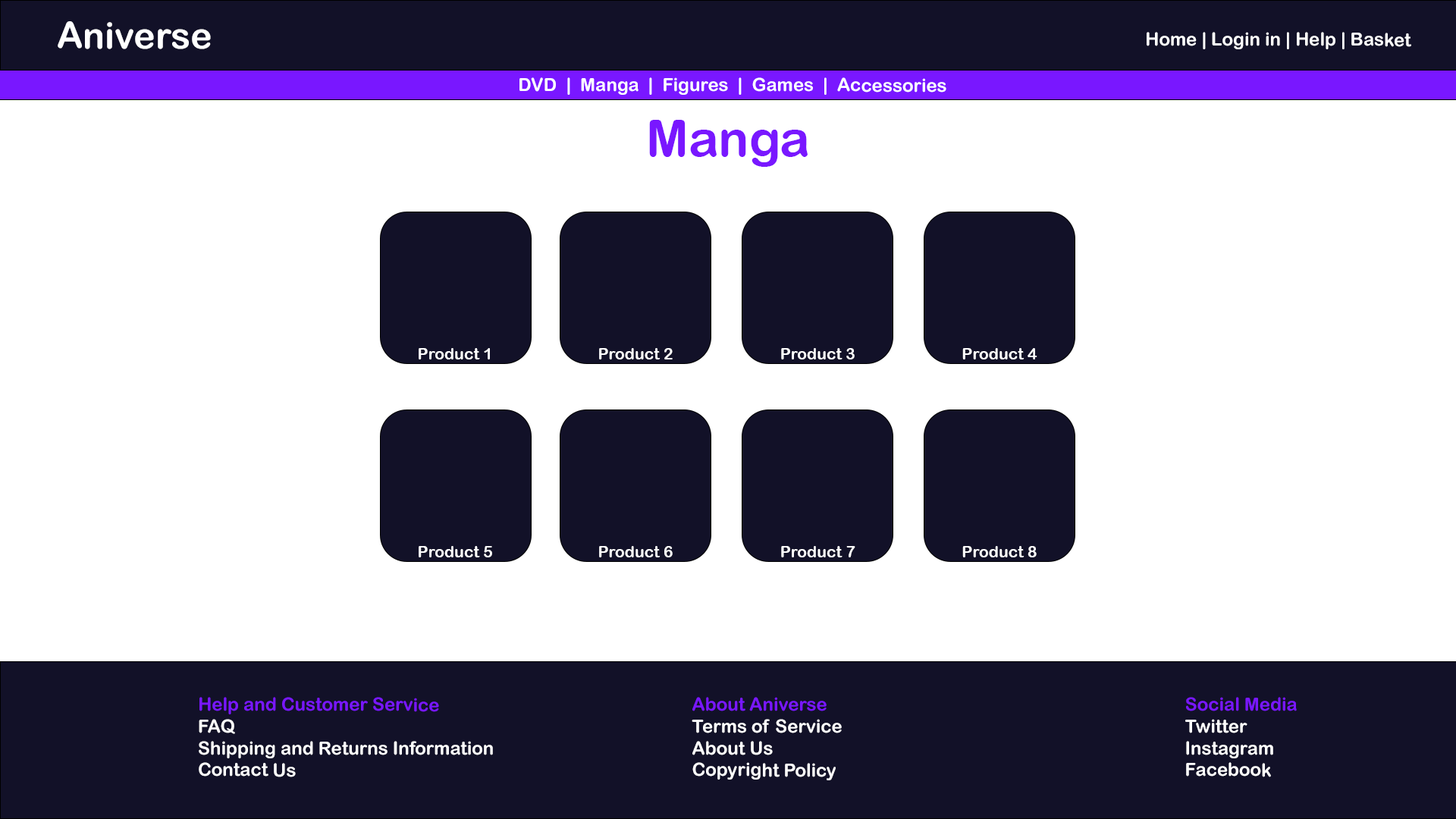
<style>
.page{position:relative;width:1456px;height:819px;background:#ffffff}
.page>*{position:absolute;margin:0}
.t1{font:36.4px "ArialRoundedMTBold";color:#ffffff}
.t2{font:18.2px "ArialRoundedMTBold";color:#ffffff}
.t3{font:50.6px "ArialRoundedMTBold";color:#7917ff}
.t4{font:16.1px "ArialRoundedMTBold";color:#ffffff}
.t5{font:18.2px "ArialRoundedMTBold";color:#7917ff}
</style>
<div class="page">
<p class="t1" style="left:58px;top:21px;width:153px;height:28px">Aniverse</p>
<p class="t2" style="left:1147px;top:32px;width:264px;height:17px">Home | Login in | Help | Basket</p>
<p class="t2" style="left:519px;top:77px;width:427px;height:18px">DVD  |  Manga  |  Figures  |  Games  |  Accessories</p>
<p class="t3" style="left:649px;top:120px;width:159px;height:47px">Manga</p>
<p class="t4" style="left:419px;top:348px;width:71px;height:11px">Product 1</p>
<p class="t4" style="left:599px;top:348px;width:74px;height:11px">Product 2</p>
<p class="t4" style="left:781px;top:348px;width:74px;height:11px">Product 3</p>
<p class="t4" style="left:962px;top:348px;width:75px;height:11px">Product 4</p>
<p class="t4" style="left:419px;top:546px;width:73px;height:11px">Product 5</p>
<p class="t4" style="left:599px;top:546px;width:74px;height:11px">Product 6</p>
<p class="t4" style="left:781px;top:546px;width:74px;height:11px">Product 7</p>
<p class="t4" style="left:962px;top:546px;width:75px;height:11px">Product 8</p>
<p class="t2" style="left:199px;top:697px;width:294px;height:80px"><span class="t5">Help and Customer Service<br></span>FAQ<br>Shipping and Returns Information<br>Contact Us</p>
<p class="t2" style="left:692px;top:697px;width:150px;height:83px"><span class="t5">About Aniverse<br></span>Terms of Service<br>About Us<br>Copyright Policy</p>
<p class="t2" style="left:1185px;top:697px;width:112px;height:80px"><span class="t5">Social Media<br></span>Twitter<br>Instagram<br>Facebook</p>
</div>
